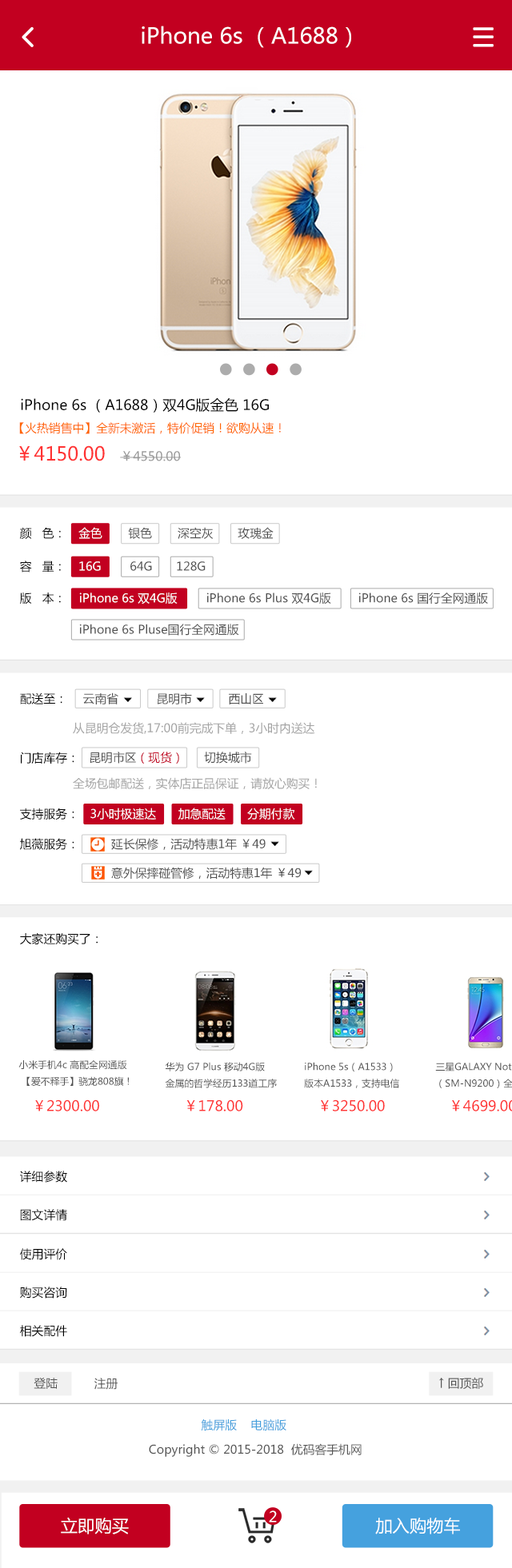
<style>
.page{position:relative;width:512px;height:1568px;background:#ffffff}
.page>*{position:absolute;margin:0}
.t1{font:21.8px "MicrosoftYaHei";color:#ffffff}
.t2{font:14.2px "MicrosoftYaHei";color:#000000}
.t3{font:11.8px "MicrosoftYaHei";color:#ff6600}
.t4{font:19px "MicrosoftYaHei";color:#ff3333}
.t5{font:12.7px "MicrosoftYaHei";color:#999999}
.t6{font:11.8px "MicrosoftYaHei";color:#000000}
.t7{font:11.8px "MicrosoftYaHei";color:#ffffff}
.t8{font:11.8px "MicrosoftYaHei";color:#515151}
.t9{font:11.8px "MicrosoftYaHei";color:#a4a4a4}
.t10{font:11.8px "MicrosoftYaHei";color:#c20020}
.t11{font:9.5px "MicrosoftYaHei";color:#515151}
.t12{font:14.2px "MicrosoftYaHei";color:#ff3333}
.t13{font:11.8px "MicrosoftYaHei";color:#555555}
.t14{font:11.8px "MicrosoftYaHei";color:#419edc}
.t15{font:17.1px "MicrosoftYaHei";color:#ffffff}
.t16{font:14.7px "MicrosoftYaHei";color:#ffffff}
</style>
<div class="page">
<p class="t1" style="left:142px;top:26px;width:209px;height:22px">iPhone 6s （A1688）</p>
<p class="t2" style="left:21px;top:397px;width:248px;height:16px">iPhone 6s （A1688）双4G版金色 16G</p>
<p class="t3" style="left:19px;top:422px;width:262px;height:12px">【火热销售中】全新未激活，特价促销！欲购从速！</p>
<p class="t4" style="left:19px;top:445px;width:86px;height:16px">￥4150.00</p>
<p class="t5" style="left:120px;top:451px;width:61px;height:10px">￥4550.00</p>
<p class="t6" style="left:20px;top:527px;width:41px;height:12px">颜   色：</p>
<p class="t7" style="left:78px;top:527px;width:24px;height:12px">金色</p>
<p class="t8" style="left:128px;top:527px;width:24px;height:12px">银色</p>
<p class="t8" style="left:178px;top:527px;width:35px;height:12px">深空灰</p>
<p class="t8" style="left:237px;top:527px;width:36px;height:12px">玫瑰金</p>
<p class="t6" style="left:20px;top:561px;width:41px;height:12px">容   量：</p>
<p class="t7" style="left:79px;top:561px;width:22px;height:10px">16G</p>
<p class="t8" style="left:130px;top:561px;width:22px;height:10px">64G</p>
<p class="t8" style="left:177px;top:561px;width:28px;height:10px">128G</p>
<p class="t6" style="left:20px;top:592px;width:41px;height:12px">版   本：</p>
<p class="t7" style="left:79px;top:592px;width:99px;height:12px">iPhone 6s 双4G版</p>
<p class="t8" style="left:206px;top:592px;width:125px;height:12px">iPhone 6s Plus 双4G版</p>
<p class="t8" style="left:358px;top:592px;width:130px;height:12px">iPhone 6s 国行全网通版</p>
<p class="t8" style="left:79px;top:624px;width:160px;height:12px">iPhone 6s Pluse国行全网通版</p>
<p class="t6" style="left:20px;top:692px;width:42px;height:12px">配送至：</p>
<p class="t8" style="left:83px;top:692px;width:35px;height:12px">云南省</p>
<p class="t8" style="left:157px;top:692px;width:35px;height:12px">昆明市</p>
<p class="t8" style="left:229px;top:693px;width:34px;height:11px">西山区</p>
<p class="t9" style="left:73px;top:722px;width:242px;height:12px">从昆明仓发货,17:00前完成下单，3小时内送达</p>
<p class="t6" style="left:21px;top:752px;width:53px;height:12px">门店库存：</p>
<p class="t8" style="left:90px;top:752px;width:89px;height:12px">昆明市区<span class="t10">（现货）</span></p>
<p class="t8" style="left:204px;top:752px;width:48px;height:12px">切换城市</p>
<p class="t9" style="left:73px;top:777px;width:244px;height:12px">全场包邮配送，实体店正品保证，请放心购买！</p>
<p class="t6" style="left:20px;top:808px;width:54px;height:12px">支持服务：</p>
<p class="t7" style="left:90px;top:808px;width:66px;height:12px">3小时极速达</p>
<p class="t7" style="left:178px;top:808px;width:47px;height:12px">加急配送</p>
<p class="t7" style="left:247px;top:808px;width:48px;height:12px">分期付款</p>
<p class="t6" style="left:20px;top:838px;width:54px;height:12px">旭薇服务：</p>
<p class="t8" style="left:111px;top:838px;width:154px;height:12px">延长保修，活动特惠1年 ￥49</p>
<p class="t8" style="left:111px;top:867px;width:190px;height:12px">意外保摔碰管修，活动特惠1年 ￥49</p>
<p class="t6" style="left:20px;top:933px;width:78px;height:12px">大家还购买了：</p>
<p class="t11" style="left:18px;top:1059px;width:111px;height:27px">小米手机4c 高配全网通版<br> 【爱不释手】骁龙808旗！</p>
<p class="t11" style="left:165px;top:1062px;width:112px;height:26px">华为 G7 Plus 移动4G版 <br>金属的哲学经历133道工序</p>
<p class="t11" style="left:304px;top:1062px;width:95px;height:26px">iPhone 5s（A1533）<br>版本A1533，支持电信</p>
<p class="t12" style="left:35px;top:1099px;width:64px;height:12px">￥2300.00</p>
<p class="t12" style="left:186px;top:1099px;width:57px;height:12px">￥178.00</p>
<p class="t12" style="left:321px;top:1099px;width:64px;height:12px">￥3250.00</p>
<p class="t6" style="left:20px;top:1171px;width:47px;height:12px">详细参数</p>
<p class="t6" style="left:20px;top:1209px;width:47px;height:12px">图文详情</p>
<p class="t6" style="left:20px;top:1248px;width:47px;height:12px">使用评价</p>
<p class="t6" style="left:20px;top:1287px;width:47px;height:12px">购买咨询</p>
<p class="t6" style="left:20px;top:1325px;width:47px;height:12px">相关配件</p>
<p class="t13" style="left:34px;top:1378px;width:24px;height:11px">登陆</p>
<p class="t13" style="left:94px;top:1378px;width:24px;height:12px">注册</p>
<p class="t13" style="left:439px;top:1377px;width:44px;height:12px">↑ 回顶部</p>
<p class="t14" style="left:201px;top:1419px;width:85px;height:12px">触屏版    电脑版</p>
<p class="t13" style="left:149px;top:1443px;width:212px;height:14px">Copyright © 2015-2018  优码客手机网</p>
<p class="t15" style="left:61px;top:1517px;width:68px;height:17px">立即购买</p>
<p class="t16" style="left:269px;top:1510px;width:8px;height:12px">2</p>
<p class="t15" style="left:375px;top:1518px;width:85px;height:16px">加入购物车</p>
</div>
